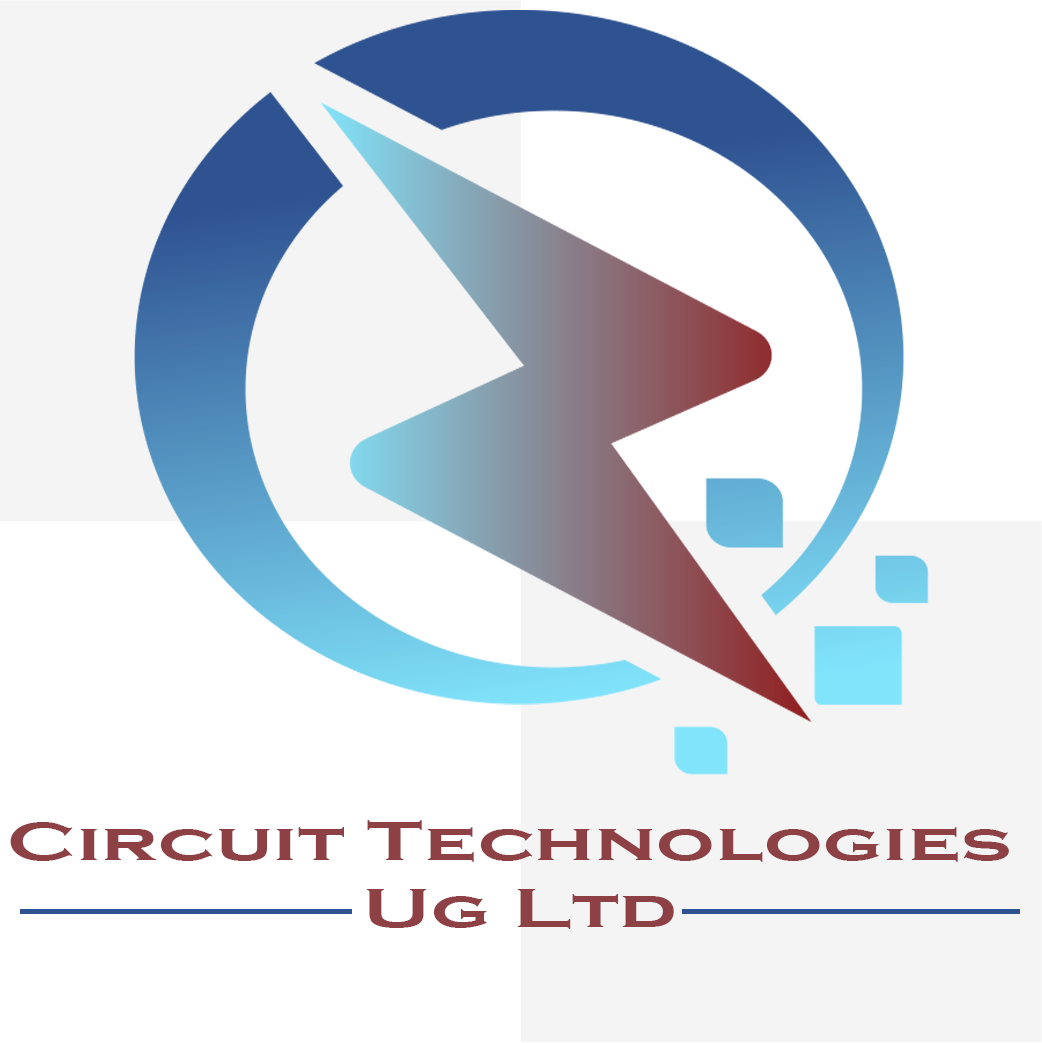
<style>
.page{position:relative;width:1042px;height:1043px;background:#ffffff}
.page>*{position:absolute;margin:0}
.t1{font:55.8px "CopperplateGothic-Bold";letter-spacing:0.014em;color:#8e4145;scale:1.46 1}
</style>
<div class="page">
<p class="t1" style="left:10px;top:820px;width:999px;height:109px;text-align:center">Circuit Technologies <br>Ug Ltd</p>
</div>
